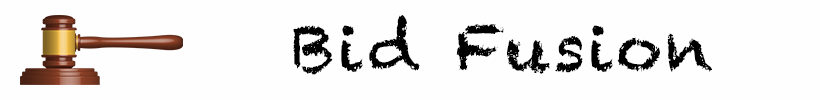
<style>
.page{position:relative;width:820px;height:100px;background:#fffeff}
.page>*{position:absolute;margin:0}
.t1{font:64px "Chalkduster";letter-spacing:0.04em;color:#000000}
</style>
<div class="page">
<p class="t1" style="left:293px;top:15px;width:419px;height:60px">Bid Fusion</p>
</div>
